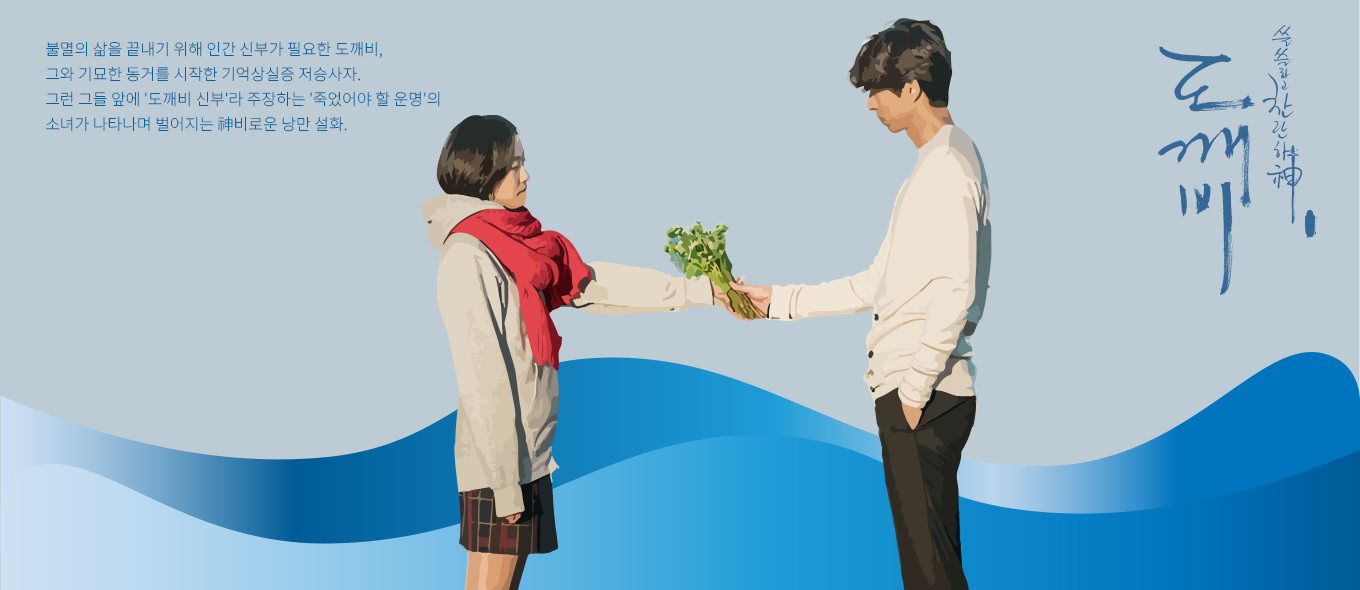
<style>
.page{position:relative;width:1360px;height:590px;background:#bdccd4}
.page>*{position:absolute;margin:0}
.t1{font:16px/25px "NotoSansKR-Thin";color:#0464a0;font-weight:bold}
</style>
<div class="page">
<p class="t1" style="left:46px;top:41px;width:394px;height:91px">불멸의 삶을 끝내기 위해 인간 신부가 필요한 도깨비, <br>그와 기묘한 동거를 시작한 기억상실증 저승사자. <br>그런 그들 앞에 '도깨비 신부'라 주장하는 '죽었어야 할 운명'의 <br>소녀가 나타나며 벌어지는 神비로운 낭만 설화.</p>
</div>
